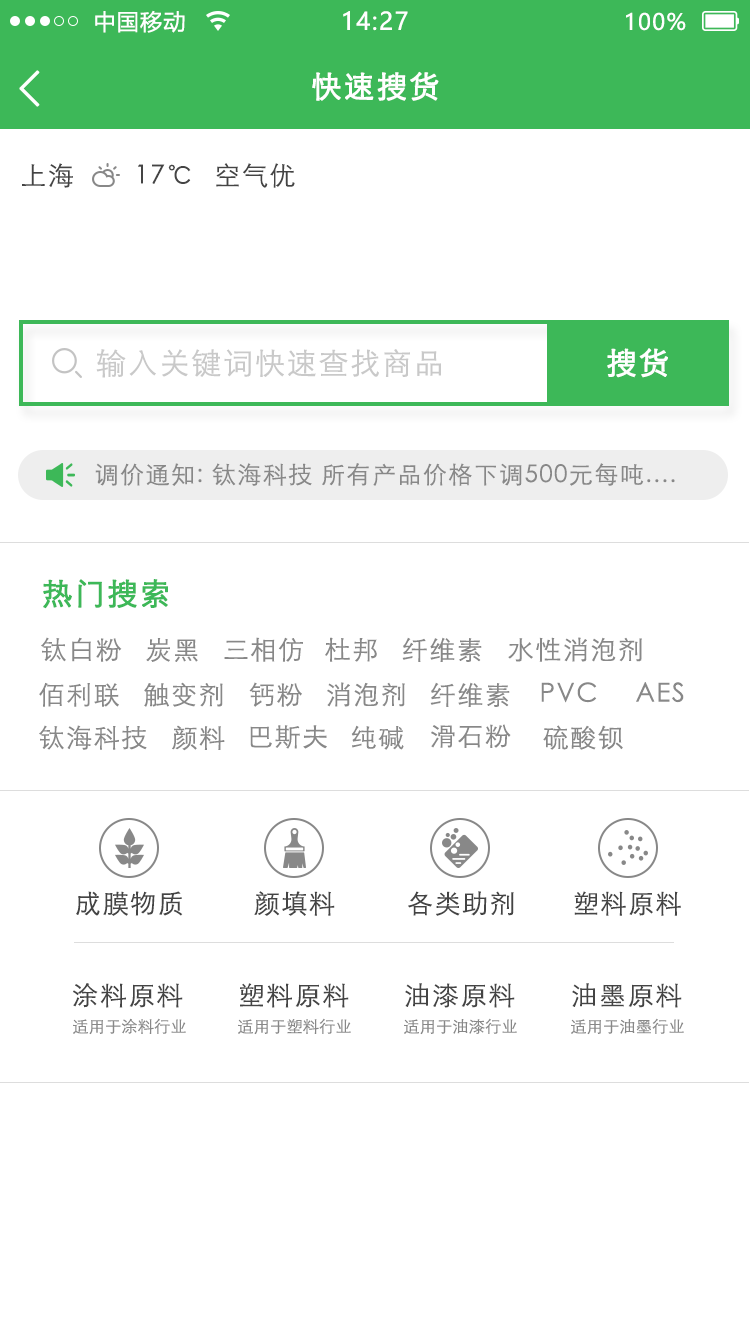
<style>
.page{position:relative;width:750px;height:1334px;background:#ffffff}
.page>*{position:absolute;margin:0}
.t1{font:22px "MicrosoftYaHei";letter-spacing:0.06em;color:#ffffff}
.t2{font:24px "MicrosoftYaHei";letter-spacing:0.06em;color:#ffffff}
.t3{font:49.8px "NSimSun";letter-spacing:0.06em;color:#fefffe;font-weight:bold}
.t4{font:30px "STXihei";letter-spacing:0.06em;color:#ffffff;font-weight:bold}
.t5{font:26px "STXihei";letter-spacing:0.06em;color:#444444}
.t6{font:30px "STXihei";letter-spacing:0.06em;color:#c9c9c9}
.t7{font:24px "STXihei";letter-spacing:0.06em;color:#888888}
.t8{font:30px "STXihei";letter-spacing:0.06em;color:#3db858;font-weight:bold}
.t9{font:26px "STXihei";letter-spacing:0.06em;color:#888888}
.t10{font:16px "STXihei";color:#888888}
</style>
<div class="page">
<p class="t1" style="left:95px;top:10px;width:90px;height:23px">中国移动</p>
<p class="t2" style="left:343px;top:11px;width:65px;height:20px">14:27</p>
<p class="t1" style="left:626px;top:12px;width:60px;height:19px">100%</p>
<p class="t3" style="left:19px;top:70px;width:21px;height:37px">&lt;</p>
<p class="t4" style="left:312px;top:71px;width:127px;height:30px">快速搜货</p>
<p class="t5" style="left:22px;top:163px;width:51px;height:25px">上海</p>
<p class="t5" style="left:138px;top:164px;width:53px;height:20px">17℃</p>
<p class="t5" style="left:216px;top:163px;width:79px;height:25px">空气优</p>
<p class="t6" style="left:96px;top:349px;width:345px;height:29px">输入关键词快速查找商品</p>
<p class="t4" style="left:607px;top:348px;width:61px;height:30px">搜货</p>
<p class="t7" style="left:95px;top:463px;width:580px;height:23px">调价通知: 钛海科技 所有产品价格下调500元每吨....</p>
<p class="t8" style="left:43px;top:579px;width:125px;height:30px">热门搜索</p>
<p class="t9" style="left:41px;top:637px;width:81px;height:25px">钛白粉</p>
<p class="t9" style="left:146px;top:638px;width:52px;height:24px">炭黑</p>
<p class="t9" style="left:224px;top:637px;width:79px;height:25px">三相仿</p>
<p class="t9" style="left:325px;top:637px;width:52px;height:25px">杜邦</p>
<p class="t9" style="left:402px;top:637px;width:80px;height:25px">纤维素</p>
<p class="t9" style="left:508px;top:637px;width:134px;height:25px">水性消泡剂</p>
<p class="t9" style="left:39px;top:682px;width:80px;height:25px">佰利联</p>
<p class="t9" style="left:144px;top:682px;width:79px;height:25px">触变剂</p>
<p class="t9" style="left:249px;top:682px;width:53px;height:25px">钙粉</p>
<p class="t9" style="left:327px;top:682px;width:78px;height:25px">消泡剂</p>
<p class="t9" style="left:430px;top:682px;width:80px;height:25px">纤维素</p>
<p class="t9" style="left:541px;top:682px;width:56px;height:21px">PVC</p>
<p class="t9" style="left:636px;top:682px;width:48px;height:21px">AES</p>
<p class="t9" style="left:39px;top:725px;width:108px;height:25px">钛海科技</p>
<p class="t9" style="left:172px;top:725px;width:53px;height:26px">颜料</p>
<p class="t9" style="left:250px;top:725px;width:77px;height:24px">巴斯夫</p>
<p class="t9" style="left:351px;top:725px;width:53px;height:25px">纯碱</p>
<p class="t9" style="left:431px;top:724px;width:80px;height:24px">滑石粉</p>
<p class="t9" style="left:543px;top:725px;width:80px;height:25px">硫酸钡</p>
<p class="t5" style="left:76px;top:891px;width:107px;height:25px">成膜物质</p>
<p class="t5" style="left:254px;top:891px;width:81px;height:25px">颜填料</p>
<p class="t5" style="left:408px;top:891px;width:106px;height:25px">各类助剂</p>
<p class="t5" style="left:574px;top:891px;width:107px;height:25px">塑料原料</p>
<p class="t5" style="left:73px;top:983px;width:110px;height:25px">涂料原料</p>
<p class="t5" style="left:240px;top:983px;width:109px;height:25px">塑料原料</p>
<p class="t5" style="left:405px;top:983px;width:110px;height:25px">油漆原料</p>
<p class="t5" style="left:572px;top:983px;width:110px;height:25px">油墨原料</p>
<p class="t10" style="left:73px;top:1018px;width:113px;height:17px">适用于涂料行业</p>
<p class="t10" style="left:238px;top:1018px;width:113px;height:17px">适用于塑料行业</p>
<p class="t10" style="left:404px;top:1018px;width:113px;height:17px">适用于油漆行业</p>
<p class="t10" style="left:571px;top:1018px;width:113px;height:17px">适用于油墨行业</p>
</div>
